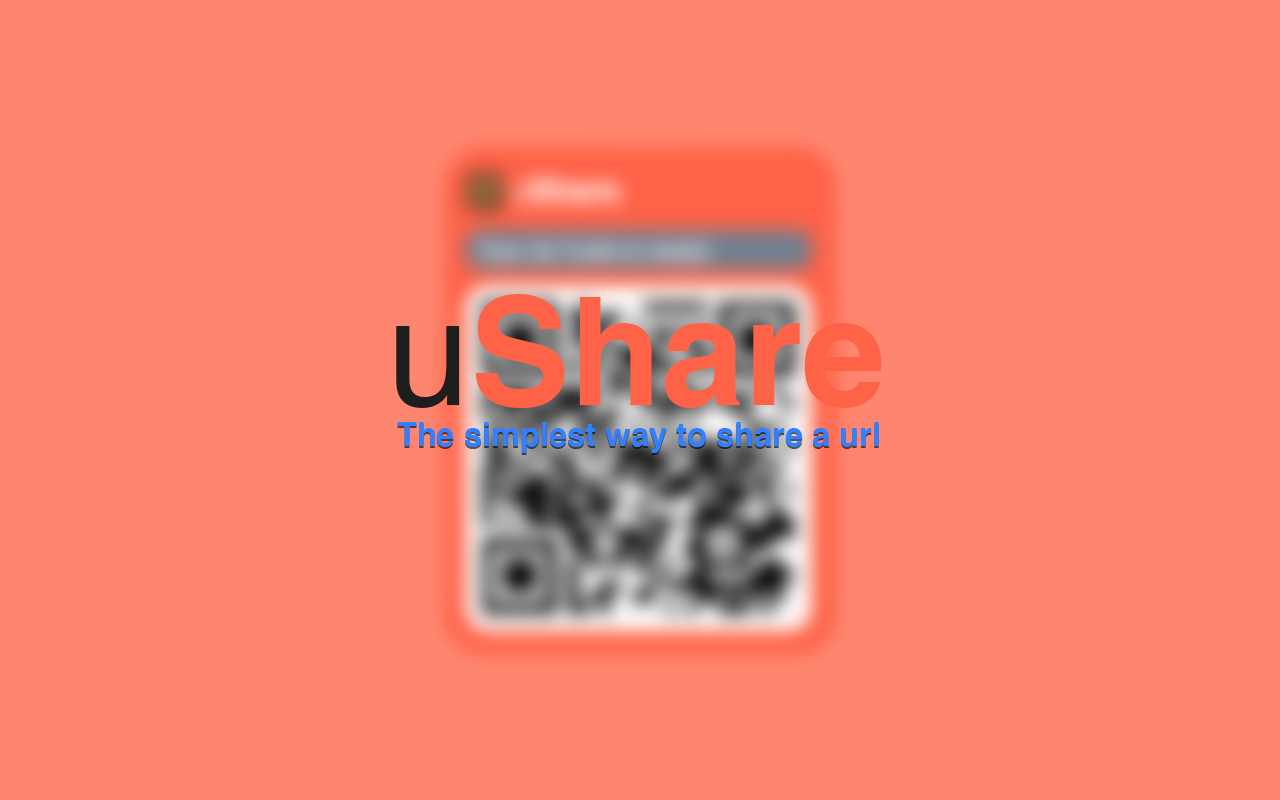
<style>
.page{position:relative;width:1280px;height:800px;background:#fe866f}
.page>*{position:absolute;margin:0}
.t1{font:149.3px "Helvetica-Bold";color:#fe6247}
.t2{font:149.3px "Helvetica";color:#1e1e1e}
.t3{font:32.6px "Helvetica-Bold";color:#3380ff}
</style>
<div class="page">
<p class="t1" style="left:396px;top:294px;width:486px;height:114px"><span class="t2">u</span>Share</p>
<p class="t3" style="left:397px;top:422px;width:482px;height:31px">The simplest way to share a url</p>
</div>
